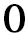
<style>
.page{position:relative;width:28px;height:35px;background:#ffffff}
.page>*{position:absolute;margin:0}
.t1{font:37.5px "ChiaroStd-B";color:#000000}
</style>
<div class="page">
<p class="t1" style="left:4px;top:4px;width:21px;height:29px">0</p>
</div>
